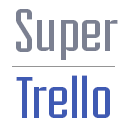
<style>
.page{position:relative;width:128px;height:128px;background:#ffffff}
.page>*{position:absolute;margin:0}
.t1{font:62.2px "Fairview-Regular";color:#7b8091;scale:1.12 1}
.t2{font:62.2px "Fairview-Regular";color:#3f5ab3;scale:1.12 1}
</style>
<div class="page">
<p class="t1" style="left:16px;top:9px;width:102px;height:51px">Super</p>
<p class="t2" style="left:16px;top:75px;width:94px;height:43px">Trello</p>
</div>
